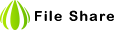
<style>
.page{position:relative;width:117px;height:30px;background:#ffffff}
.page>*{position:absolute;margin:0}
.t1{font:14px "ArialRoundedMTBold";letter-spacing:0.1em;color:#000000}
</style>
<div class="page">
<p class="t1" style="left:35px;top:10px;width:79px;height:11px">File Share</p>
</div>
